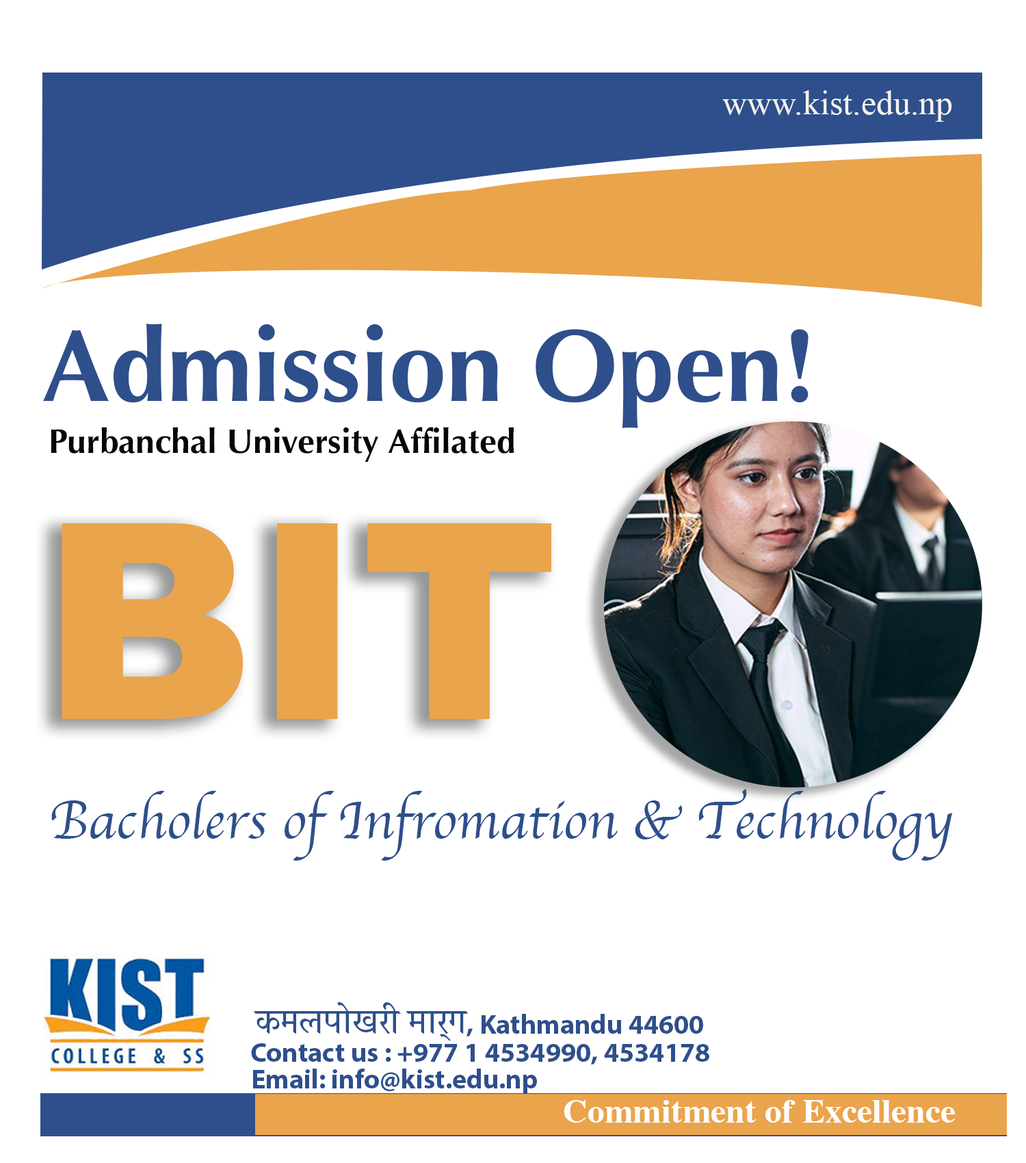
<style>
.page{position:relative;width:1026px;height:1163px;background:#ffffff}
.page>*{position:absolute;margin:0}
.t1{font:34.2px "TimesNewRomanPSMT";color:#f6f3ef}
.t2{font:102.6px "Optima-Bold";color:#2e4f8b}
.t3{font:34.2px "Optima-Bold";color:#060606}
.t4{font:273.5px "Arial-Black";color:#eaa44b}
.t5{font:54.7px "Apple-Chancery";color:#2e4f8b}
.t6{font:34.2px "MyriadPro-Regular";color:#000000}
.t7{font:27.4px "MyriadPro-Bold";color:#2e4f8b}
.t8{font:34.2px "ITFDevanagari-Medium";color:#2e4f8b}
.t9{font:34.2px "Times-Bold";color:#ffffff}
</style>
<div class="page">
<p class="t1" style="left:722px;top:90px;width:230px;height:32px">www.kist.edu.np</p>
<p class="t2" style="left:43px;top:323px;width:765px;height:105px">Admission Open!</p>
<p class="t3" style="left:51px;top:427px;width:463px;height:35px">Purbanchal University Affilated</p>
<p class="t4" style="left:62px;top:523px;width:490px;height:196px">BIT</p>
<p class="t5" style="left:51px;top:788px;width:902px;height:72px"><span class="t6"><br></span>Bacholers of Infromation &amp; Technology</p>
<p class="t7" style="left:254px;top:1002px;width:449px;height:39px"><span class="t8">कमलपोखरी मार्ग</span>, Kathmandu 44600</p>
<p class="t7" style="left:251px;top:1043px;width:458px;height:21px">Contact us : +977 1 4534990, 4534178</p>
<p class="t7" style="left:253px;top:1068px;width:284px;height:25px">Email: info@kist.edu.np</p>
<p class="t9" style="left:563px;top:1100px;width:392px;height:22px">Commitment of Excellence</p>
</div>
